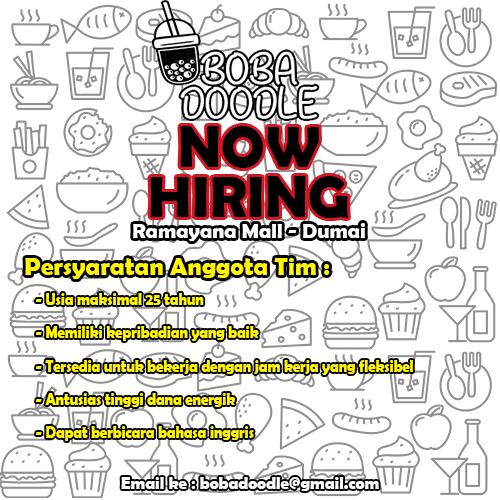
<style>
.page{position:relative;width:500px;height:500px;background:#ffffff}
.page>*{position:absolute;margin:0}
.t1{font:58.3px/50px "BerlinSansFBDemi-Bold";letter-spacing:0.005em;color:#000000}
.t2{font:20.8px "BerlinSansFBDemi-Bold";letter-spacing:0.005em;color:#ffffff}
.t3{font:25px "BerlinSansFBDemi-Bold";letter-spacing:0.005em;color:#fff600}
.t4{font:16.7px/33.3px "BerlinSansFBDemi-Bold";letter-spacing:0.005em;color:#fff600;scale:0.87 1}
.t5{font:16.7px "BerlinSansFBDemi-Bold";letter-spacing:0.005em;color:#ffffff}
</style>
<div class="page">
<p class="t1" style="left:150px;top:126px;width:198px;height:92px;text-align:center">NOW<br>HIRING</p>
<p class="t2" style="left:133px;top:223px;width:232px;height:18px">Ramayana Mall - Dumai</p>
<p class="t3" style="left:25px;top:258px;width:304px;height:21px">Persyaratan Anggota Tim :</p>
<p class="t4" style="left:36px;top:293px;width:377px;height:148px">- Usia maksimal 25 tahun<br>- Memiliki kepribadian yang baik<br>- Tersedia untuk bekerja dengan jam kerja yang fleksibel<br>- Antusias tinggi dana energik<br>- Dapat berbicara bahasa inggris</p>
<p class="t5" style="left:121px;top:477px;width:258px;height:14px">Email ke : bobadoodle@gmail.com</p>
</div>
